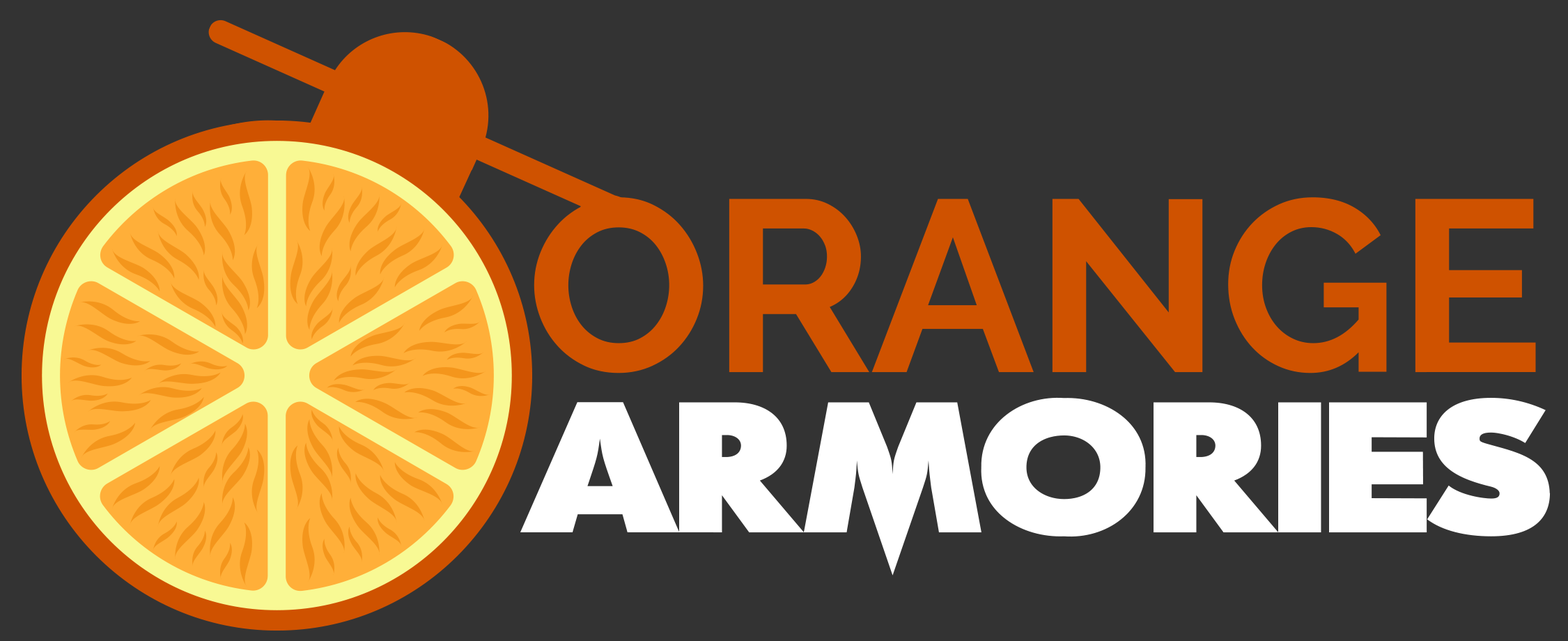
<style>
.page{position:relative;width:1568px;height:641px;background:#333333}
.page>*{position:absolute;margin:0}
.t1{font:243.8px "Raleway-Bold";color:#cf5200}
.t2{font:180.4px "ScreamReal";color:#ffffff}
</style>
<div class="page">
<p class="t1" style="left:534px;top:197px;width:1002px;height:176px">ORANGE</p>
<p class="t2" style="left:520px;top:397px;width:1031px;height:178px">ARMORIES</p>
</div>
